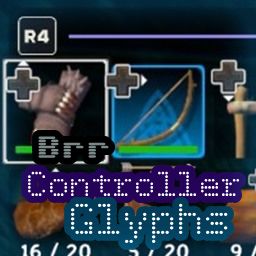
<style>
.page{position:relative;width:256px;height:256px}
.page>*{position:absolute;margin:0}
.t1{font:25px "Sixtyfour-Regular";color:#7b8888}
.t2{font:36px "BPdots";color:#ffffff}
.t3{font:45px "BPdots";color:#ffffff}
</style>
<div class="page">
<p class="t1" style="left:38px;top:136px;width:71px;height:22px">Brr</p>
<p class="t2" style="left:28px;top:171px;width:212px;height:25px">Controller</p>
<p class="t3" style="left:71px;top:203px;width:157px;height:40px">Glyphs</p>
</div>
